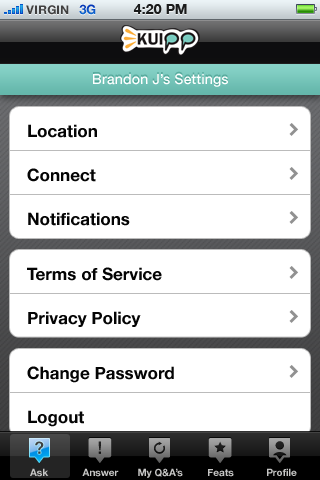
<style>
.page{position:relative;width:320px;height:480px;background:#ffffff}
.page>*{position:absolute;margin:0}
.t1{font:12px "HelveticaNeue-Bold";color:#404040;text-transform:uppercase}
.t2{font:13px "HelveticaNeue-Bold";color:#0c54c5;text-transform:uppercase}
.t3{font:14px "HelveticaNeue-Bold";color:#1a1b1b;text-transform:uppercase}
.t4{font:14px "HelveticaNeue-Medium";letter-spacing:0.01em;color:#ffffff}
.t5{font:17px/44px "HelveticaNeue-Bold";color:#040404}
.t6{font:10px "HelveticaNeue-Bold";color:#c6c6c5}
</style>
<div class="page">
<p class="t1" style="left:26px;top:5px;width:43px;height:10px">VIRGIN</p>
<p class="t2" style="left:79px;top:4px;width:17px;height:11px">3G</p>
<p class="t3" style="left:133px;top:4px;width:54px;height:10px">4:20 PM</p>
<p class="t4" style="left:93px;top:73px;width:135px;height:14px">Brandon J’s Settings</p>
<p class="t5" style="left:27px;top:124px;width:103px;height:102px">Location<br>Connect<br>Notifications</p>
<p class="t5" style="left:27px;top:267px;width:135px;height:60px">Terms of Service<br>Privacy Policy</p>
<p class="t5" style="left:27px;top:366px;width:147px;height:61px">Change Password<br>Logout</p>
<p class="t6" style="left:30px;top:468px;width:19px;height:9px">Ask</p>
<p class="t6" style="left:82px;top:468px;width:37px;height:9px">Answer</p>
<p class="t6" style="left:138px;top:468px;width:45px;height:10px">My Q&amp;A’s</p>
<p class="t6" style="left:208px;top:469px;width:26px;height:8px">Feats</p>
<p class="t6" style="left:267px;top:468px;width:30px;height:8px">Profile</p>
</div>
